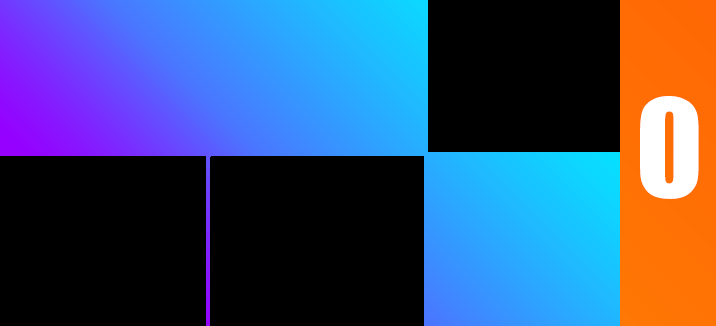
<style>
.page{position:relative;width:716px;height:326px;background:#000000}
.page>*{position:absolute;margin:0}
.t1{font:125px "Impact";color:#ffffff}
</style>
<div class="page">
<p class="t1" style="left:640px;top:96px;width:59px;height:103px">0</p>
</div>
